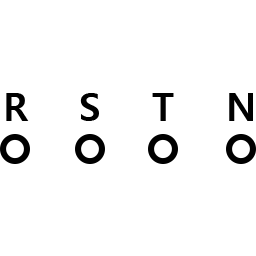
<style>
.page{position:relative;width:256px;height:256px;background:#ffffff}
.page>*{position:absolute;margin:0}
.t1{font:37.5px "MalgunGothicBold";color:#000000}
</style>
<div class="page">
<p class="t1" style="left:6px;top:93px;width:23px;height:28px">R</p>
<p class="t1" style="left:80px;top:93px;width:19px;height:28px">S</p>
<p class="t1" style="left:152px;top:93px;width:22px;height:28px">T</p>
<p class="t1" style="left:229px;top:93px;width:24px;height:28px">N</p>
</div>
